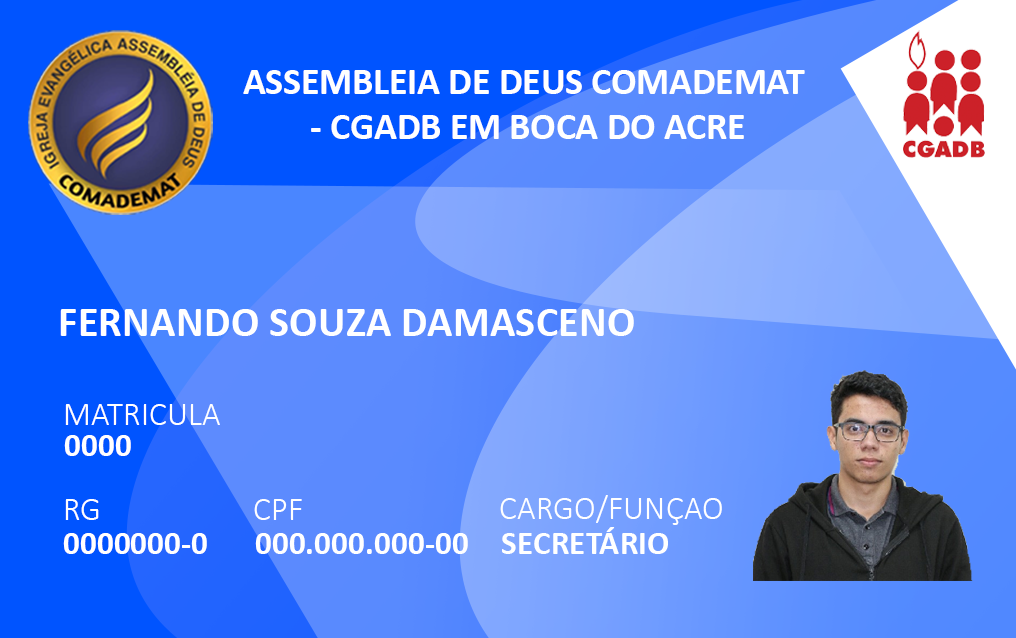
<style>
.page{position:relative;width:1016px;height:638px}
.page>*{position:absolute;margin:0}
.t1{font:37.5px "Calibri-Bold";color:#ffffff}
.t2{font:42.5px "Calibri-Bold";color:#ffffff}
.t3{font:33.3px "Calibri-Light";color:#ffffff}
.t4{font:33.3px "Calibri-Bold";color:#ffffff}
</style>
<div class="page">
<p class="t1" style="left:243px;top:70px;width:562px;height:69px;text-align:center">ASSEMBLEIA DE DEUS COMADEMAT <br>- CGADB EM BOCA DO ACRE</p>
<p class="t2" style="left:60px;top:309px;width:574px;height:27px">FERNANDO SOUZA DAMASCENO</p>
<p class="t3" style="left:65px;top:404px;width:155px;height:21px">MATRICULA</p>
<p class="t4" style="left:64px;top:435px;width:67px;height:21px">0000</p>
<p class="t3" style="left:500px;top:495px;width:222px;height:30px">CARGO/FUNÇAO</p>
<p class="t3" style="left:65px;top:499px;width:34px;height:21px">RG</p>
<p class="t3" style="left:254px;top:499px;width:48px;height:21px">CPF</p>
<p class="t4" style="left:63px;top:533px;width:144px;height:21px">0000000-0</p>
<p class="t4" style="left:255px;top:533px;width:213px;height:21px">000.000.000-00</p>
<p class="t4" style="left:502px;top:527px;width:166px;height:27px">SECRETÁRIO</p>
</div>
